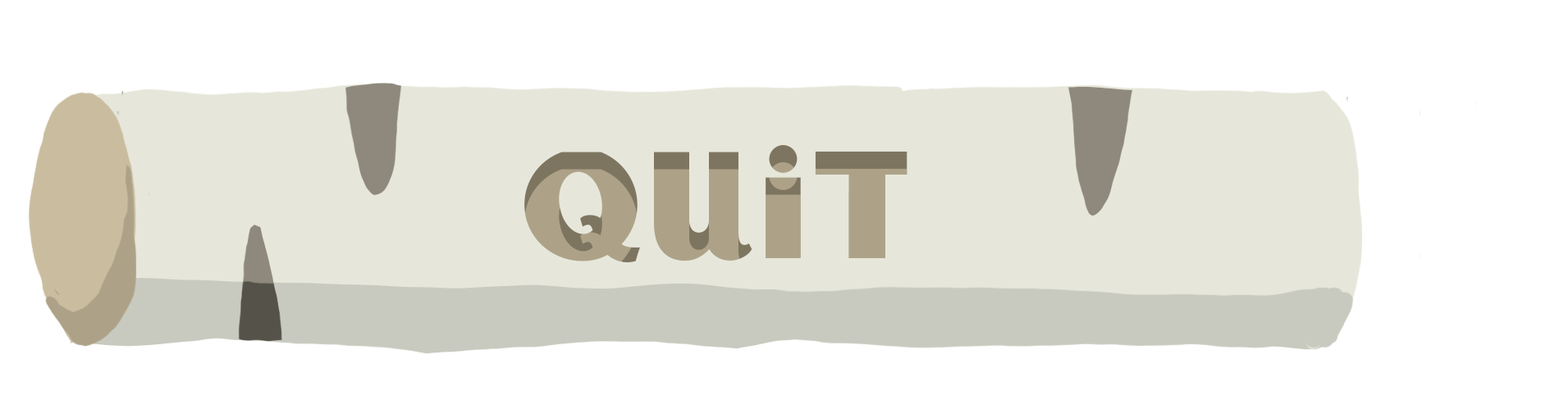
<style>
.page{position:relative;width:1568px;height:409px;background:#ffffff}
.page>*{position:absolute;margin:0}
.t1{font:148px "BadTyp-Regular";color:#ada288}
</style>
<div class="page">
<p class="t1" style="left:524px;top:145px;width:383px;height:118px">quit</p>
</div>
